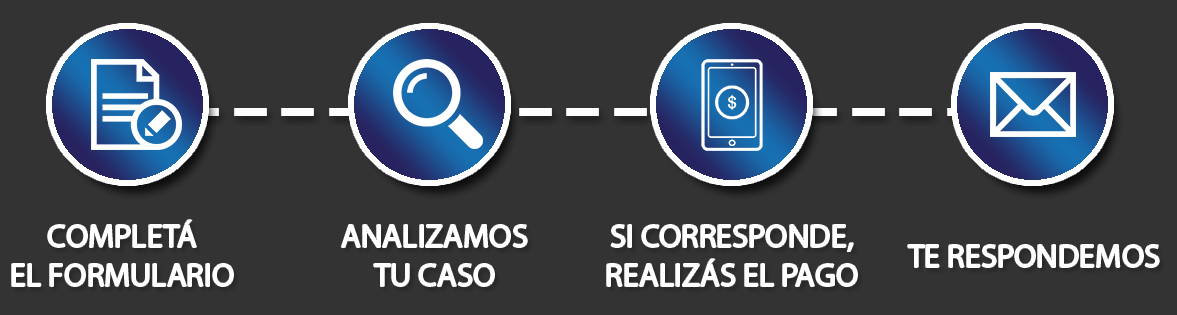
<style>
.page{position:relative;width:1177px;height:315px;background:#333333}
.page>*{position:absolute;margin:0}
.t1{font:121px "OpenSymbol"}
.t2{font:32.5px "MyriadPro-Regular";color:#ffffff}
</style>
<div class="page">
<p class="t1" style="left:139px;top:108px;width:936px;height:8px">--------------------</p>
<p class="t2" style="left:12px;top:220px;width:221px;height:66px;text-align:center">COMPLETÁ<br>EL FORMULARIO</p>
<p class="t2" style="left:341px;top:225px;width:186px;height:61px;text-align:center">ANALIZAMOS<br>TU CASO</p>
<p class="t2" style="left:607px;top:225px;width:250px;height:61px;text-align:center">SI CORRESPONDE,<br>REALIZÁS EL PAGO</p>
<p class="t2" style="left:908px;top:245px;width:251px;height:22px">TE RESPONDEMOS</p>
</div>
